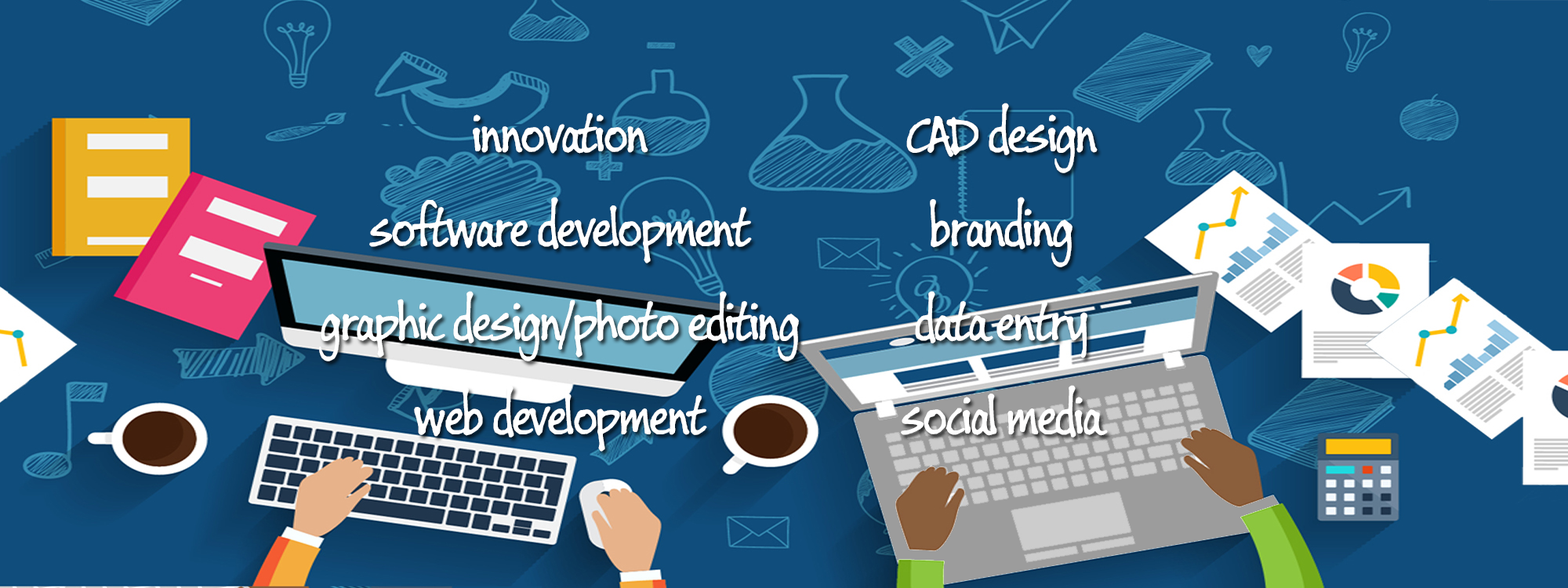
<style>
.page{position:relative;width:1568px;height:588px;background:#104d7c}
.page>*{position:absolute;margin:0}
.t1{font:56.4px/94.1px "BuxtonSketch";letter-spacing:-0.057em;color:#ffffff}
</style>
<div class="page">
<p class="t1" style="left:319px;top:113px;width:480px;height:339px;text-align:center">innovation<br>software development<br>graphic design/photo editing<br>web development</p>
<p class="t1" style="left:901px;top:103px;width:207px;height:334px;text-align:center">CAD design<br>branding<br>data entry<br>social media</p>
</div>
